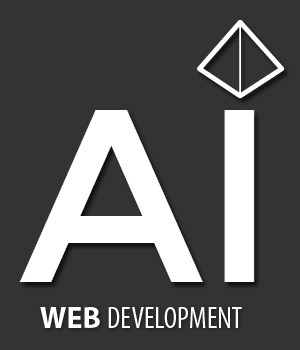
<style>
.page{position:relative;width:300px;height:350px;background:#333333}
.page>*{position:absolute;margin:0}
.t1{font:30px "MyriadPro-Cond";color:#ffffff}
.t2{font:30px "MyriadPro-Bold";color:#ffffff}
</style>
<div class="page">
<p class="t1" style="left:40px;top:307px;width:202px;height:21px"><span class="t2">WEB </span>DEVELOPMENT</p>
</div>
